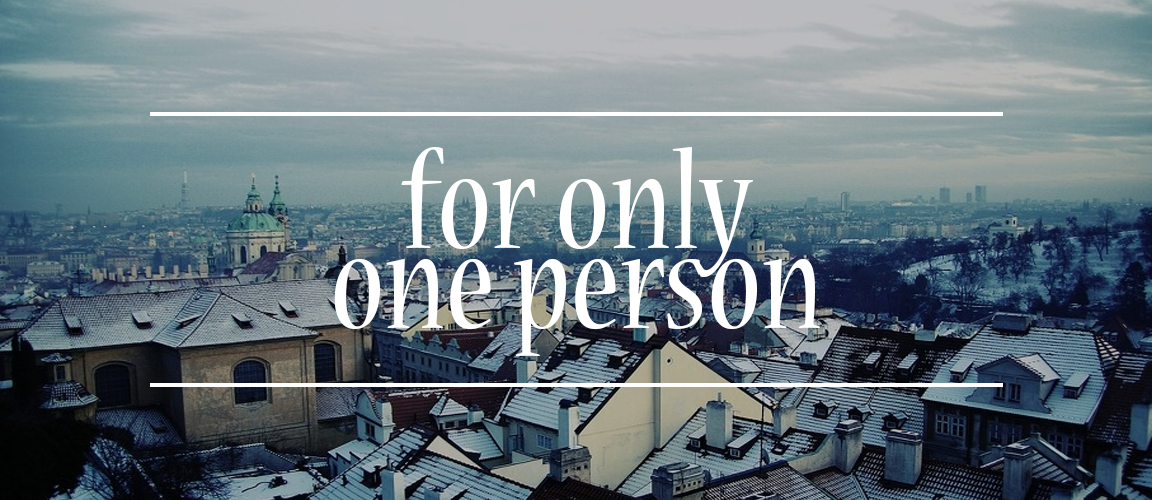
<style>
.page{position:relative;width:1152px;height:500px}
.page>*{position:absolute;margin:0}
.t1{font:150px/80px "NuevaStd-Cond";color:#ffffff}
</style>
<div class="page">
<p class="t1" style="left:334px;top:147px;width:486px;height:210px;text-align:center">for only<br>one person</p>
</div>
